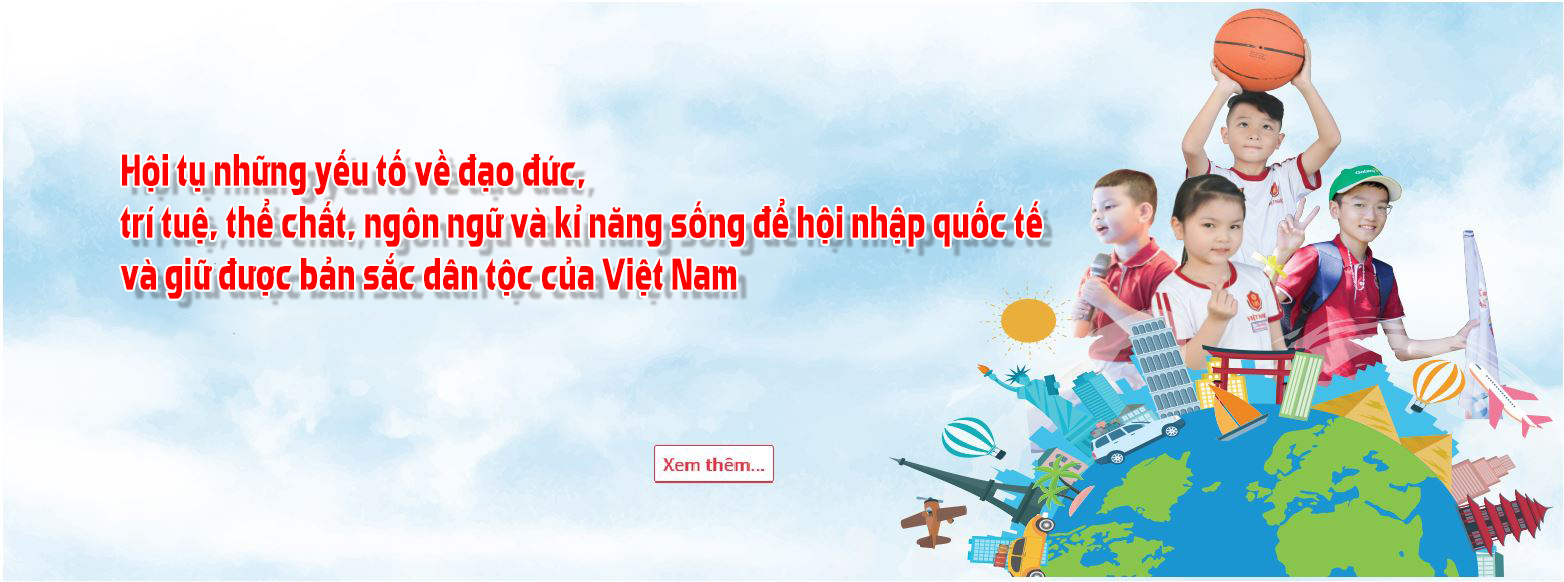
<style>
.page{position:relative;width:1564px;height:582px}
.page>*{position:absolute;margin:0}
.t1{font:43.3px "UTM-Eremitage";letter-spacing:0.05em;color:#ff0101;scale:0.68 1}
</style>
<div class="page">
<p class="t1" style="left:120px;top:149px;width:922px;height:150px;text-align:right">Hội tụ những yếu tố về đạo đức,<br>trí tuệ, thể chất, ngôn ngữ và kỉ năng sống để hội nhập quốc tế <br>và giữ được bản sắc dân tộc của Việt Nam</p>
</div>
